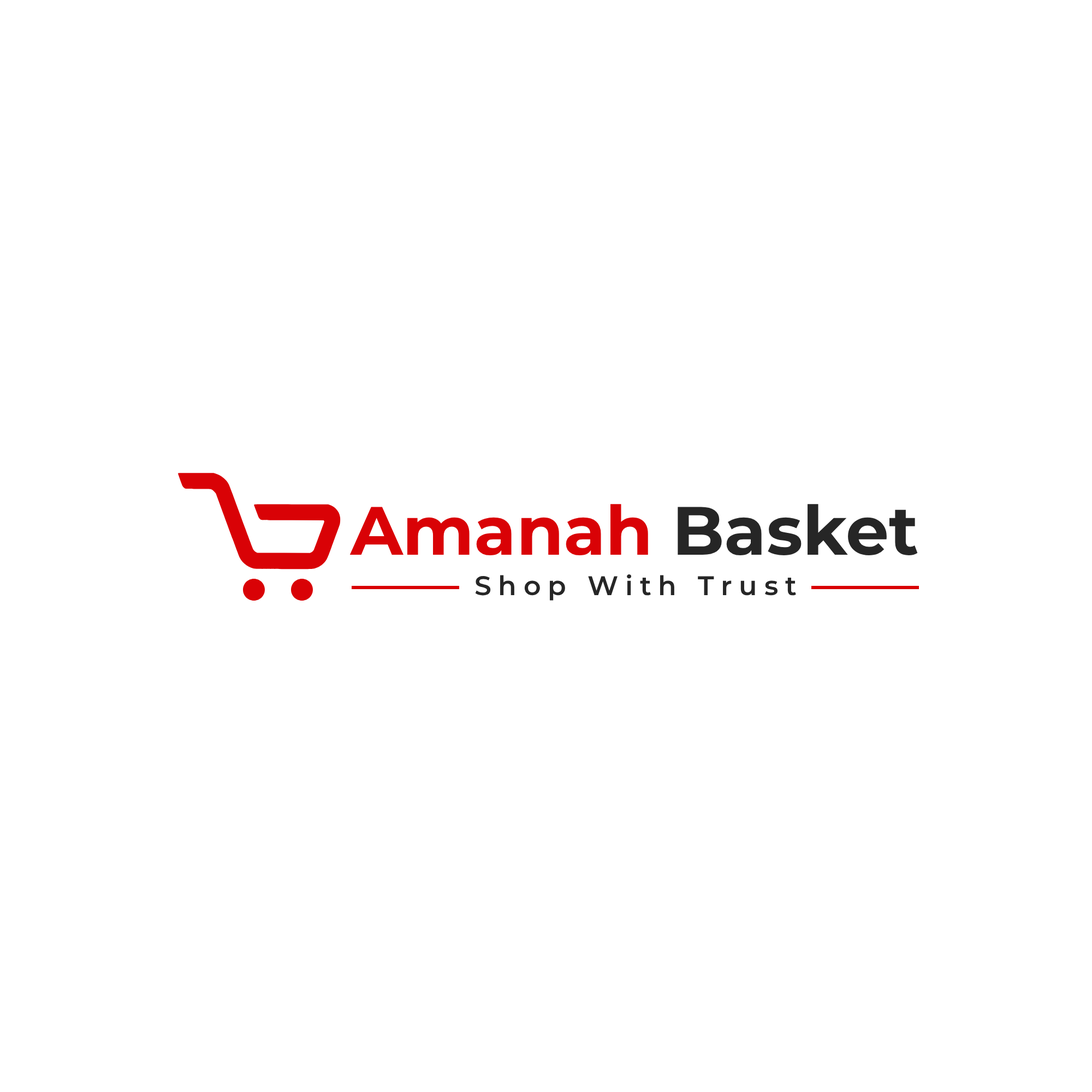
<style>
.page{position:relative;width:1092px;height:1092px;background:#ffffff}
.page>*{position:absolute;margin:0}
.t1{font:68.2px "Montserrat-Bold";color:#d90206}
.t2{font:68.2px "Montserrat-Bold";color:#262626}
.t3{font:26.8px "Montserrat-SemiBold";letter-spacing:0.26em;color:#262626}
</style>
<div class="page">
<p class="t1" style="left:349px;top:504px;width:569px;height:51px">Amanah <span class="t2">Basket</span></p>
<p class="t3" style="left:475px;top:574px;width:321px;height:27px">Shop With Trust</p>
</div>
